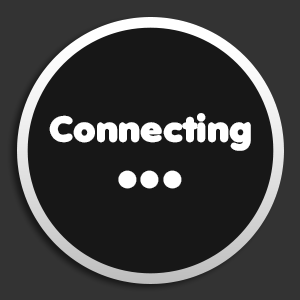
<style>
.page{position:relative;width:300px;height:300px;background:#171717}
.page>*{position:absolute;margin:0}
.t1{font:35.9px "Debussy";color:#ffffff}
.t2{font:73.2px "Debussy";color:#ffffff}
</style>
<div class="page">
<p class="t1" style="left:49px;top:113px;width:202px;height:38px">Connecting</p>
<p class="t2" style="left:118px;top:170px;width:64px;height:19px">...</p>
</div>
